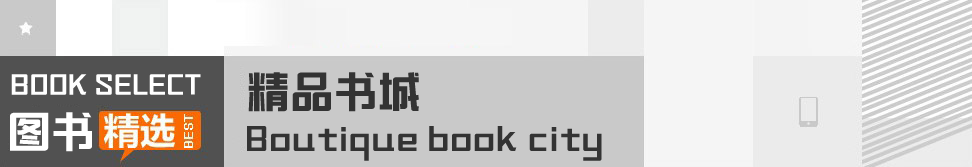
<style>
.page{position:relative;width:972px;height:167px;background:#c9c9c9}
.page>*{position:absolute;margin:0}
.t1{font:23.3px "MFJianHei_Noncommercial-Regular";letter-spacing:0.04em;color:#ffffff}
.t2{font:40.2px "MFJianHei_Noncommercial-Regular";letter-spacing:0.04em;color:#333333}
.t3{font:40.2px "MFJianHei_Noncommercial-Regular";letter-spacing:0.04em;color:#ffffff}
.t4{font:28.8px "MFJianHei_Noncommercial-Regular";letter-spacing:0.04em;color:#333333}
</style>
<div class="page">
<p class="t1" style="left:11px;top:74px;width:190px;height:21px">BOOK SELECT</p>
<p class="t2" style="left:248px;top:72px;width:171px;height:40px">精品书城</p>
<p class="t3" style="left:10px;top:112px;width:82px;height:40px">图书</p>
<p class="t4" style="left:247px;top:126px;width:355px;height:35px">Boutique book city</p>
</div>
